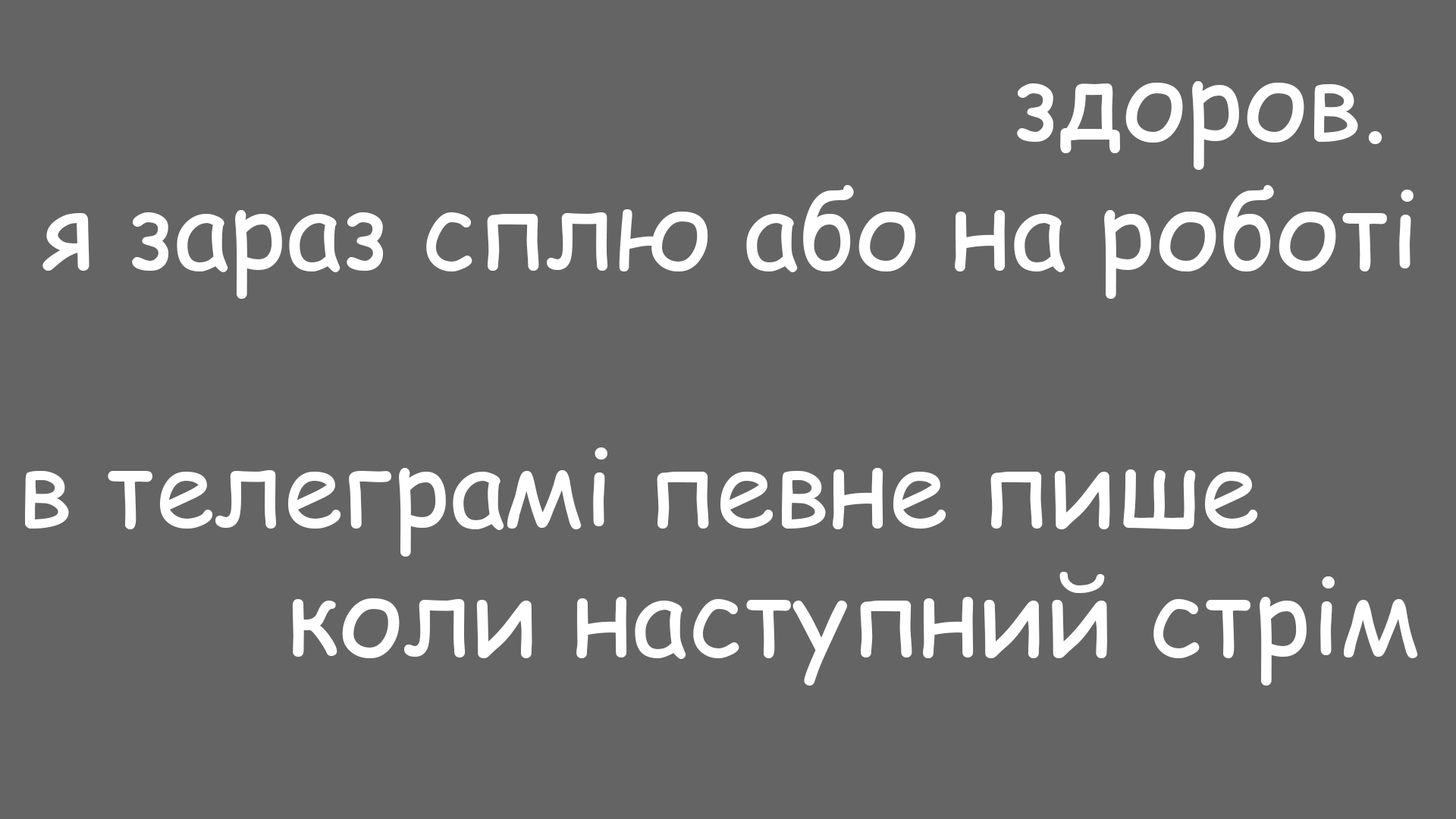
<style>
.page{position:relative;width:1456px;height:819px;background:#646464}
.page>*{position:absolute;margin:0}
.t1{font:107.4px "ComicSansMS";color:#ffffff}
</style>
<div class="page">
<p class="t1" style="left:25px;top:81px;width:1393px;height:605px;text-align:right">здоров. <br>я зараз сплю або на роботі<br><br>в телеграмі певне пише     <br>коли наступний стрім</p>
</div>
